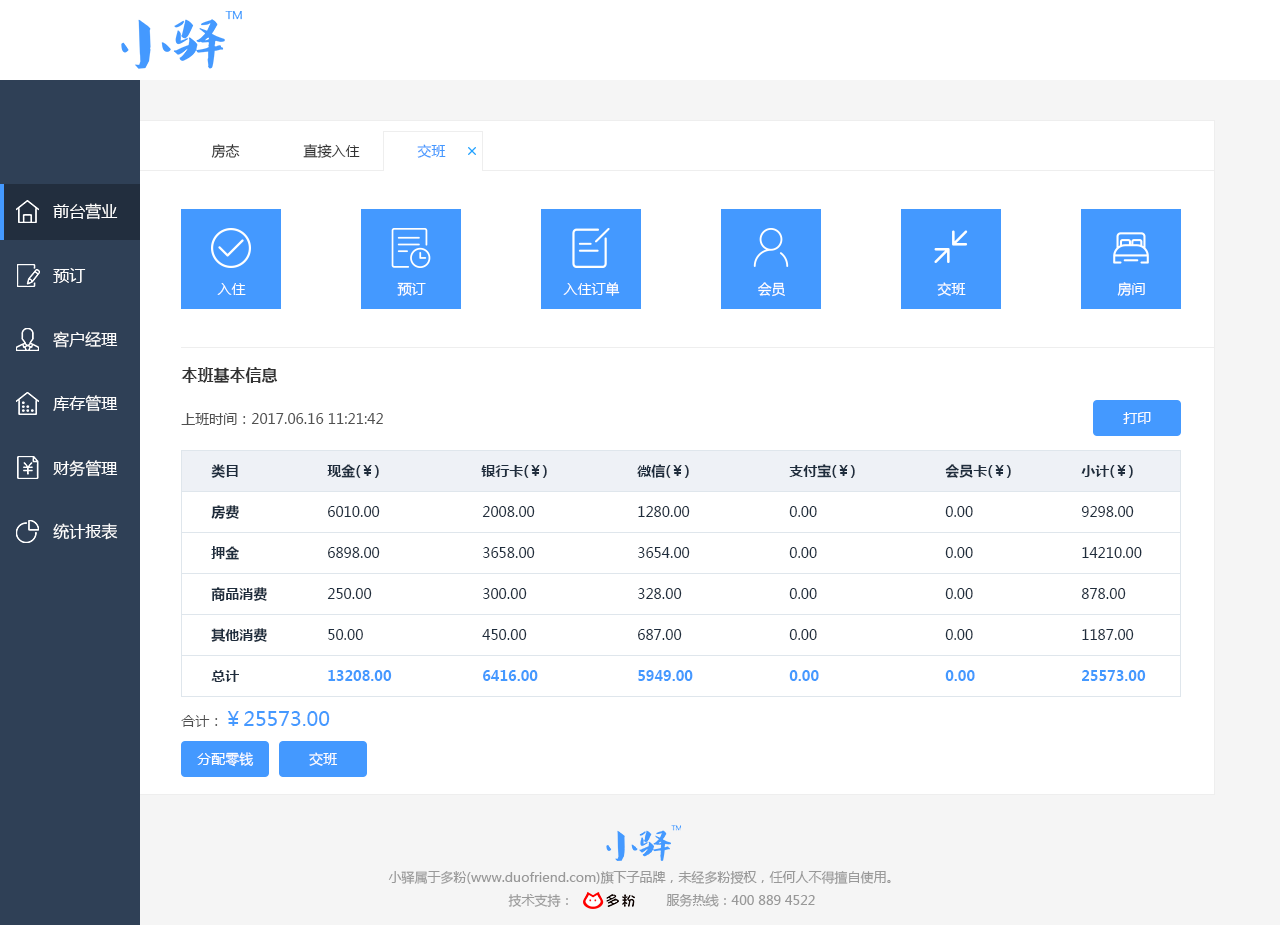
<style>
.page{position:relative;width:1280px;height:925px;background:#ffffff}
.page>*{position:absolute;margin:0}
.t1{font:14px "MicrosoftYaHei";color:#333333}
.t2{font:14px "MicrosoftYaHei";color:#4499ff}
.t3{font:16px "MicrosoftYaHei";color:#ffffff}
.t4{font:14px "MicrosoftYaHei";color:#ffffff}
.t5{font:16px "MicrosoftYaHei-Bold";color:#333333}
.t6{font:14px "MicrosoftYaHei";color:#505050}
.t7{font:14px "MicrosoftYaHei-Bold";color:#1f2d3d}
.t8{font:14px "MicrosoftYaHei";color:#1f2d3d}
.t9{font:14px "MicrosoftYaHei-Bold";color:#4499ff}
.t10{font:20px "MicrosoftYaHei";color:#4499ff}
.t11{font:13px "MicrosoftYaHei";color:#999999}
</style>
<div class="page">
<p class="t1" style="left:211px;top:144px;width:29px;height:14px">房态</p>
<p class="t1" style="left:303px;top:144px;width:57px;height:14px">直接入住</p>
<p class="t2" style="left:417px;top:144px;width:29px;height:14px">交班</p>
<p class="t3" style="left:53px;top:203px;width:65px;height:17px">前台营业</p>
<p class="t3" style="left:53px;top:268px;width:33px;height:15px">预订</p>
<p class="t4" style="left:217px;top:283px;width:29px;height:12px">入住</p>
<p class="t4" style="left:397px;top:282px;width:29px;height:14px">预订</p>
<p class="t4" style="left:563px;top:282px;width:57px;height:14px">入住订单</p>
<p class="t4" style="left:758px;top:282px;width:27px;height:15px">会员</p>
<p class="t4" style="left:937px;top:282px;width:29px;height:14px">交班</p>
<p class="t4" style="left:1117px;top:282px;width:28px;height:14px">房间</p>
<p class="t3" style="left:53px;top:331px;width:65px;height:17px">客户经理</p>
<p class="t5" style="left:181px;top:367px;width:97px;height:16px">本班基本信息</p>
<p class="t3" style="left:53px;top:395px;width:65px;height:17px">库存管理</p>
<p class="t6" style="left:181px;top:413px;width:202px;height:12px">上班时间：2017.06.16 11:21:42</p>
<p class="t4" style="left:1123px;top:412px;width:28px;height:12px">打印</p>
<p class="t3" style="left:53px;top:460px;width:65px;height:17px">财务管理</p>
<p class="t7" style="left:211px;top:464px;width:27px;height:14px">类目</p>
<p class="t7" style="left:327px;top:464px;width:52px;height:14px">现金(￥)</p>
<p class="t7" style="left:481px;top:465px;width:66px;height:13px">银行卡(￥)</p>
<p class="t7" style="left:637px;top:464px;width:52px;height:14px">微信(￥)</p>
<p class="t7" style="left:789px;top:464px;width:66px;height:14px">支付宝(￥)</p>
<p class="t7" style="left:945px;top:464px;width:66px;height:14px">会员卡(￥)</p>
<p class="t7" style="left:1081px;top:465px;width:52px;height:13px">小计(￥)</p>
<p class="t7" style="left:211px;top:505px;width:28px;height:14px">房费</p>
<p class="t8" style="left:328px;top:506px;width:52px;height:11px">6010.00</p>
<p class="t8" style="left:482px;top:506px;width:53px;height:11px">2008.00</p>
<p class="t8" style="left:638px;top:506px;width:52px;height:11px">1280.00</p>
<p class="t8" style="left:789px;top:506px;width:28px;height:11px">0.00</p>
<p class="t8" style="left:945px;top:506px;width:28px;height:11px">0.00</p>
<p class="t8" style="left:1081px;top:506px;width:53px;height:11px">9298.00</p>
<p class="t3" style="left:53px;top:523px;width:65px;height:17px">统计报表</p>
<p class="t7" style="left:211px;top:546px;width:28px;height:14px">押金</p>
<p class="t8" style="left:328px;top:547px;width:52px;height:11px">6898.00</p>
<p class="t8" style="left:483px;top:547px;width:52px;height:11px">3658.00</p>
<p class="t8" style="left:638px;top:547px;width:52px;height:11px">3654.00</p>
<p class="t8" style="left:789px;top:547px;width:28px;height:11px">0.00</p>
<p class="t8" style="left:945px;top:547px;width:28px;height:11px">0.00</p>
<p class="t8" style="left:1082px;top:547px;width:60px;height:11px">14210.00</p>
<p class="t7" style="left:211px;top:587px;width:56px;height:14px">商品消费</p>
<p class="t8" style="left:327px;top:588px;width:45px;height:11px">250.00</p>
<p class="t8" style="left:483px;top:588px;width:44px;height:11px">300.00</p>
<p class="t8" style="left:638px;top:588px;width:44px;height:11px">328.00</p>
<p class="t8" style="left:789px;top:588px;width:28px;height:11px">0.00</p>
<p class="t8" style="left:945px;top:588px;width:28px;height:11px">0.00</p>
<p class="t8" style="left:1081px;top:588px;width:45px;height:11px">878.00</p>
<p class="t7" style="left:211px;top:628px;width:56px;height:14px">其他消费</p>
<p class="t8" style="left:328px;top:629px;width:35px;height:11px">50.00</p>
<p class="t8" style="left:482px;top:629px;width:45px;height:11px">450.00</p>
<p class="t8" style="left:638px;top:629px;width:44px;height:11px">687.00</p>
<p class="t8" style="left:789px;top:629px;width:28px;height:11px">0.00</p>
<p class="t8" style="left:945px;top:629px;width:28px;height:11px">0.00</p>
<p class="t8" style="left:1082px;top:629px;width:52px;height:11px">1187.00</p>
<p class="t7" style="left:211px;top:670px;width:28px;height:12px">总计</p>
<p class="t9" style="left:328px;top:670px;width:64px;height:11px">13208.00</p>
<p class="t9" style="left:483px;top:670px;width:55px;height:11px">6416.00</p>
<p class="t9" style="left:638px;top:670px;width:55px;height:11px">5949.00</p>
<p class="t9" style="left:789px;top:670px;width:30px;height:11px">0.00</p>
<p class="t9" style="left:945px;top:670px;width:30px;height:11px">0.00</p>
<p class="t9" style="left:1082px;top:670px;width:64px;height:11px">25573.00</p>
<p class="t10" style="left:181px;top:711px;width:149px;height:16px"><span class="t6">合计：</span>￥25573.00</p>
<p class="t4" style="left:197px;top:752px;width:57px;height:15px">分配零钱</p>
<p class="t4" style="left:309px;top:752px;width:29px;height:14px">交班</p>
<p class="t11" style="left:388px;top:870px;width:503px;height:14px">小驿属于多粉(www.duofriend.com)旗下子品牌，未经多粉授权，任何人不得擅自使用。</p>
<p class="t11" style="left:508px;top:894px;width:60px;height:13px">技术支持：</p>
<p class="t11" style="left:666px;top:894px;width:149px;height:13px">服务热线：400 889 4522</p>
</div>
